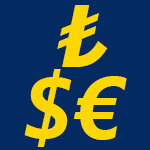
<style>
.page{position:relative;width:150px;height:150px;background:#032b61}
.page>*{position:absolute;margin:0}
.t1{font:87.5px/72.7px "SegoeUI-BoldItalic";color:#ffd700}
.t2{font:58.3px/72.7px "SegoeUIBlack";color:#ffd700}
</style>
<div class="page">
<p class="t1" style="left:24px;top:5px;width:103px;height:142px;text-align:center"><span class="t2"> </span>₺<br>$€</p>
</div>
